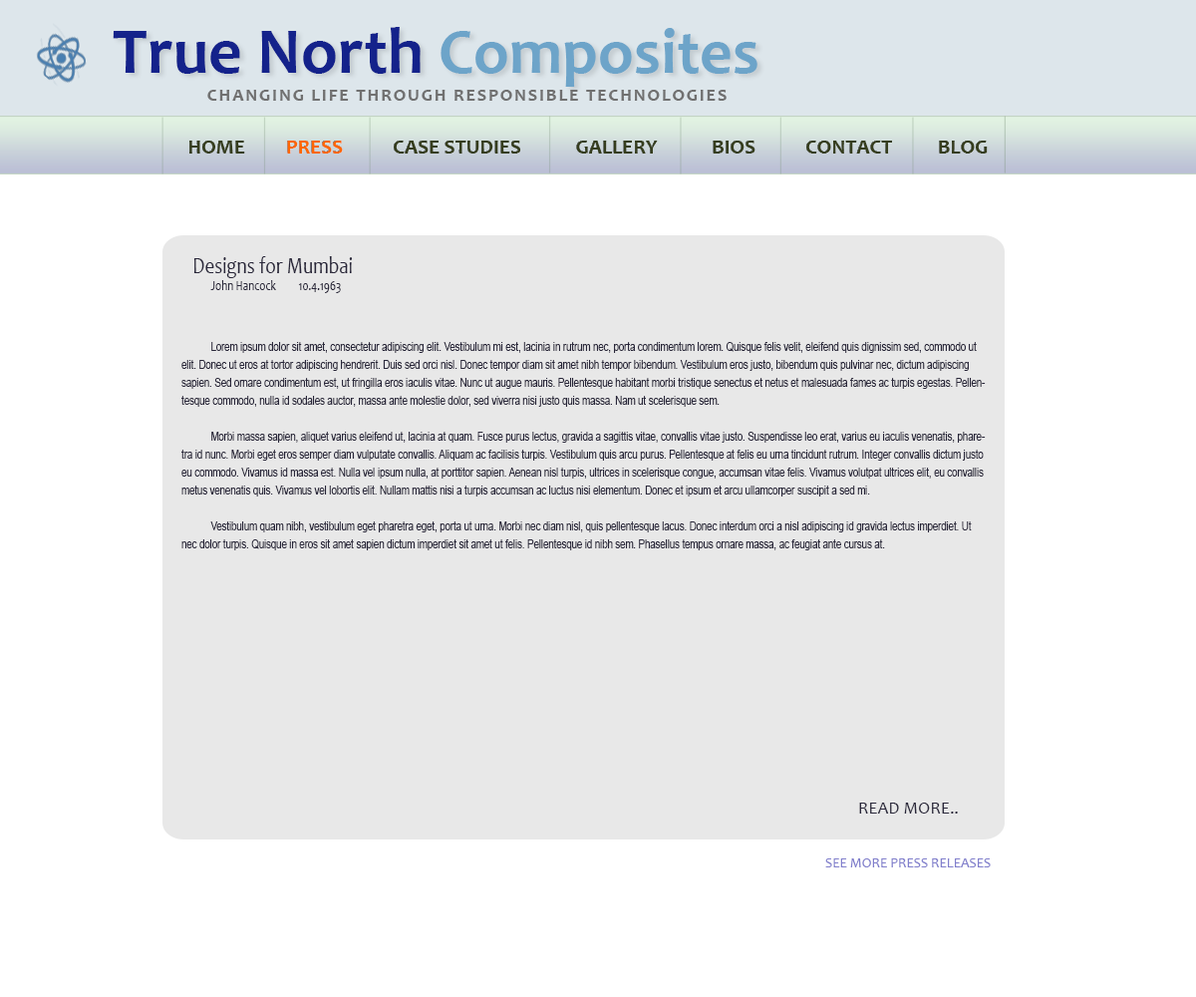
<style>
.page{position:relative;width:1196px;height:997px;background:#ffffff}
.page>*{position:absolute;margin:0}
.t1{font:66.2px "Candara-Bold";color:#14228b}
.t2{font:64px "Candara-Bold";color:#6da4c9}
.t3{font:17.9px "Candara-Bold";letter-spacing:0.1em;color:#707070;text-transform:uppercase}
.t4{font:20.9px "Candara-Bold";color:#353d1d;text-transform:uppercase}
.t5{font:20.9px "Candara-Bold";color:#ff6600;text-transform:uppercase}
.t6{font:12px/17.9px "ArialMT";color:#29273a;scale:0.79 1}
.t7{font:23.9px "Candara";color:#29273a;scale:0.79 1}
.t8{font:14px "Candara";color:#29273a;scale:0.79 1}
.t9{font:17.4px "Candara";color:#29273a;text-transform:uppercase}
.t10{font:14px "Candara";color:#817fcc;text-transform:uppercase}
</style>
<div class="page">
<p class="t1" style="left:113px;top:27px;width:645px;height:60px">True North <span class="t2">Composites</span></p>
<p class="t3" style="left:207px;top:90px;width:520px;height:11px">Changing life through responsible technologies</p>
<p class="t4" style="left:189px;top:141px;width:799px;height:13px">Home         <span class="t5">Press </span>          Case Studies            Gallery            Bios           Contact          Blog</p>
<p class="t6" style="left:181px;top:256px;width:805px;height:294px"><span class="t7">Designs for Mumbai<br> </span><span class="t8">John Hancock 10.4.1963<br><br><br>  </span>Lorem ipsum dolor sit amet, consectetur adipiscing elit. Vestibulum mi est, lacinia in rutrum nec, porta condimentum lorem. Quisque felis velit, eleifend quis dignissim sed, commodo ut elit. Donec ut eros at tortor adipiscing hendrerit. Duis sed orci nisl. Donec tempor diam sit amet nibh tempor bibendum. Vestibulum eros justo, bibendum quis pulvinar nec, dictum adipiscing sapien. Sed ornare condimentum est, ut fringilla eros iaculis vitae. Nunc ut augue mauris. Pellentesque habitant morbi tristique senectus et netus et malesuada fames ac turpis egestas. Pellentesque commodo, nulla id sodales auctor, massa ante molestie dolor, sed viverra nisi justo quis massa. Nam ut scelerisque sem.<br><br> Morbi massa sapien, aliquet varius eleifend ut, lacinia at quam. Fusce purus lectus, gravida a sagittis vitae, convallis vitae justo. Suspendisse leo erat, varius eu iaculis venenatis, pharetra id nunc. Morbi eget eros semper diam vulputate convallis. Aliquam ac facilisis turpis. Vestibulum quis arcu purus. Pellentesque at felis eu urna tincidunt rutrum. Integer convallis dictum justo eu commodo. Vivamus id massa est. Nulla vel ipsum nulla, at porttitor sapien. Aenean nisl turpis, ultrices in scelerisque congue, accumsan vitae felis. Vivamus volutpat ultrices elit, eu convallis metus venenatis quis. Vivamus vel lobortis elit. Nullam mattis nisi a turpis accumsan ac luctus nisi elementum. Donec et ipsum et arcu ullamcorper suscipit a sed mi.<br><br> Vestibulum quam nibh, vestibulum eget pharetra eget, porta ut urna. Morbi nec diam nisl, quis pellentesque lacus. Donec interdum orci a nisl adipiscing id gravida lectus imperdiet. Ut nec dolor turpis. Quisque in eros sit amet sapien dictum imperdiet sit amet ut felis. Pellentesque id nibh sem. Phasellus tempus ornare massa, ac feugiat ante cursus at.</p>
<p class="t9" style="left:859px;top:802px;width:99px;height:11px">Read more..</p>
<p class="t10" style="left:825px;top:858px;width:166px;height:9px">See More PRess Releases</p>
</div>
